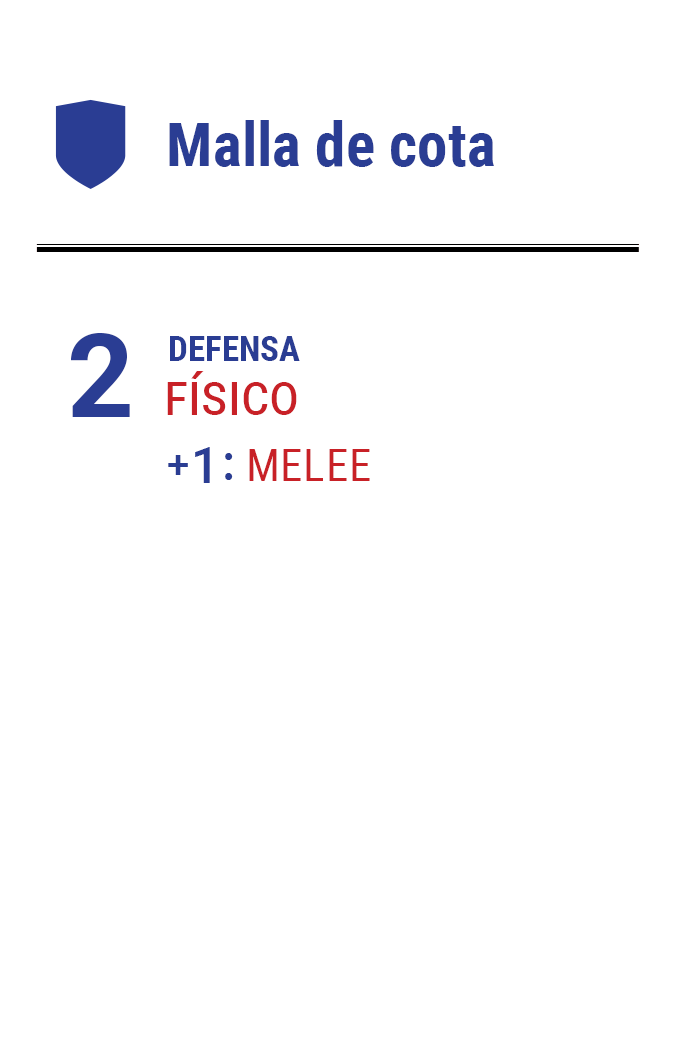
<style>
.page{position:relative;width:675px;height:1050px;background:#ffffff}
.page>*{position:absolute;margin:0}
.t1{font:61.2px "RobotoCondensed-Bold";color:#2a3d93}
.t2{font:116.7px "Roboto-Bold";letter-spacing:-0.16em;color:#2a3d93}
.t3{font:35px "RobotoCondensed-Bold";color:#2a3d93}
.t4{font:58.3px "RobotoCondensed-Regular";color:#c82127;font-variant:small-caps}
.t5{font:49.8px "Roboto-Medium";letter-spacing:-0.1em;color:#2a3d93}
.t6{font:39.7px "Roboto-Medium";letter-spacing:-0.1em;color:#2a3d93}
.t7{font:44.6px "RobotoCondensed-Regular";letter-spacing:0.02em;color:#c82127;text-transform:uppercase}
</style>
<div class="page">
<p class="t1" style="left:169px;top:120px;width:325px;height:47px">Malla de cota</p>
<p class="t2" style="left:71px;top:333px;width:59px;height:84px">2</p>
<p class="t3" style="left:170px;top:336px;width:130px;height:25px">DEFENSA</p>
<p class="t4" style="left:167px;top:371px;width:130px;height:44px">físico</p>
<p class="t5" style="left:168px;top:447px;width:65px;height:36px"><span class="t6">+ </span>1 :</p>
<p class="t7" style="left:249px;top:449px;width:121px;height:32px">melee</p>
</div>
